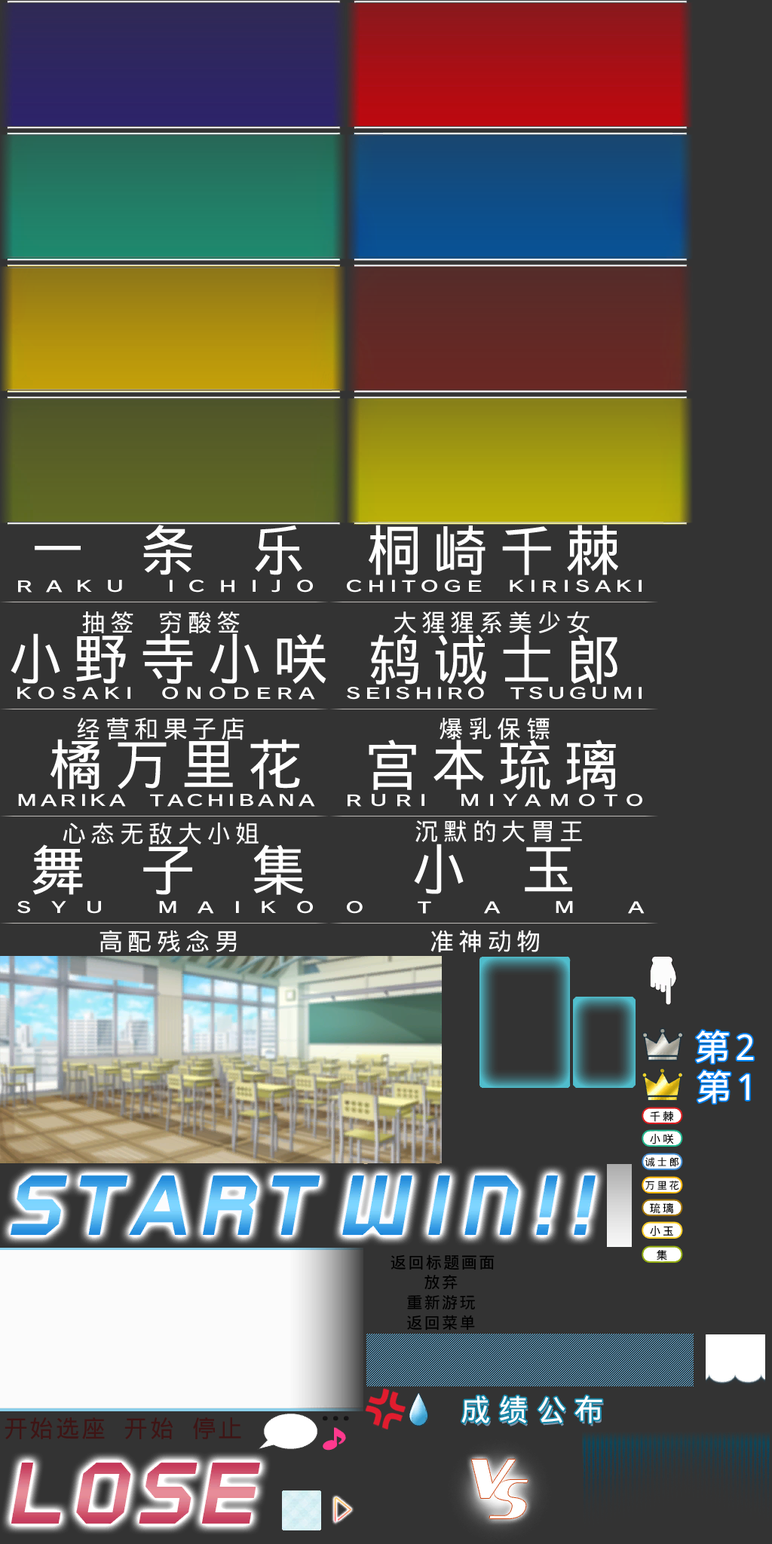
<style>
.page{position:relative;width:772px;height:1544px;background:#333333}
.page>*{position:absolute;margin:0}
.t1{font:55.3px "WenQuanYiMicroHeiMono";letter-spacing:0.2em;color:#ffffff}
.t2{font:24.1px "WenQuanYiMicroHeiMono";letter-spacing:0.2em;color:#ffffff}
.t3{font:36.2px "WenQuanYiMicroHeiMono";letter-spacing:0.1em;color:#ffffff}
.t4{font:11.1px "WenQuanYiMicroHeiMono";letter-spacing:0.2em;color:#000000}
.t5{font:10.1px "WenQuanYiMicroHeiMono";letter-spacing:0.2em;color:#000000}
.t6{font:16.1px/20.1px "WenQuanYiMicroHeiMono";letter-spacing:0.1em;color:#000000}
.t7{font:30.2px "WenQuanYiMicroHeiMono";letter-spacing:0.25em;color:#ffffff}
.t8{font:30.2px "WenQuanYiMicroHeiMono";letter-spacing:0.25em}
.t9{font:24.1px "WenQuanYiMicroHeiMono";letter-spacing:0.075em;color:#3e1515}
</style>
<div class="page">
<p class="t1" style="left:35px;top:525px;width:267px;height:50px">一 条 乐</p>
<p class="t1" style="left:368px;top:525px;width:250px;height:50px">桐崎千棘</p>
<p class="t2" style="left:82px;top:611px;width:158px;height:22px">抽签 穷酸签</p>
<p class="t2" style="left:394px;top:612px;width:196px;height:21px">大猩猩系美少女</p>
<p class="t1" style="left:11px;top:633px;width:316px;height:51px">小野寺小咲</p>
<p class="t1" style="left:370px;top:634px;width:248px;height:51px">鸫诚士郎</p>
<p class="t2" style="left:77px;top:718px;width:167px;height:22px">经营和果子店</p>
<p class="t2" style="left:440px;top:718px;width:110px;height:22px">爆乳保镖</p>
<p class="t1" style="left:50px;top:739px;width:250px;height:51px">橘万里花</p>
<p class="t1" style="left:369px;top:740px;width:247px;height:50px">宫本琉璃</p>
<p class="t2" style="left:415px;top:820px;width:167px;height:22px">沉默的大胃王</p>
<p class="t2" style="left:63px;top:823px;width:196px;height:22px">心态无敌大小姐</p>
<p class="t1" style="left:32px;top:845px;width:272px;height:50px">舞 子 集</p>
<p class="t1" style="left:414px;top:844px;width:158px;height:50px">小 玉</p>
<p class="t2" style="left:100px;top:930px;width:137px;height:23px">高配残念男</p>
<p class="t2" style="left:431px;top:930px;width:108px;height:22px">准神动物</p>
<p class="t3" style="left:696px;top:1030px;width:58px;height:34px">第2</p>
<p class="t3" style="left:697px;top:1070px;width:53px;height:34px">第1</p>
<p class="t4" style="left:650px;top:1111px;width:24px;height:11px">千棘</p>
<p class="t4" style="left:650px;top:1133px;width:24px;height:12px">小咲</p>
<p class="t5" style="left:645px;top:1157px;width:34px;height:10px">诚士郎</p>
<p class="t5" style="left:645px;top:1181px;width:34px;height:10px">万里花</p>
<p class="t4" style="left:650px;top:1203px;width:23px;height:11px">琉璃</p>
<p class="t4" style="left:650px;top:1225px;width:23px;height:12px">小玉</p>
<p class="t4" style="left:657px;top:1250px;width:10px;height:11px">集</p>
<p class="t6" style="left:391px;top:1255px;width:104px;height:76px;text-align:center">返回标题画面  <br>放弃<br>重新游玩<br>返回菜单</p>
<p class="t7" style="left:461px;top:1396px;width:141px;height:28px">成绩公布</p>
<p class="t8" style="left:463px;top:1399px;width:141px;height:28px">成绩公布</p>
<p class="t9" style="left:5px;top:1417px;width:236px;height:22px">开始选座 开始 停止</p>
</div>
